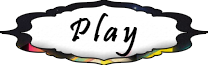
<style>
.page{position:relative;width:208px;height:65px;background:#ffffff}
.page>*{position:absolute;margin:0}
.t1{font:34px "Pristina-Regular";letter-spacing:0.125em;color:#000000;font-weight:bold}
.t2{font:34px "Pristina-Regular";letter-spacing:0.125em;font-weight:bold}
</style>
<div class="page">
<p class="t1" style="left:70px;top:13px;width:67px;height:44px">Play</p>
<p class="t2" style="left:72px;top:13px;width:67px;height:44px">Play</p>
</div>
